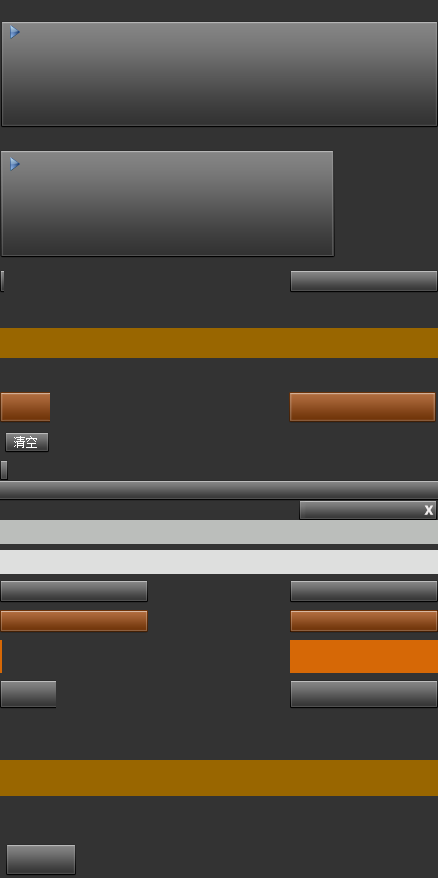
<style>
.page{position:relative;width:438px;height:878px;background:#333333}
.page>*{position:absolute;margin:0}
.t1{font:12px "NSimSun";color:#ffffff}
.t2{font:12px "MicrosoftYaHei-Bold";color:#f0eded}
</style>
<div class="page">
<p class="t1" style="left:14px;top:436px;width:23px;height:12px">清空</p>
<p class="t1" style="left:15px;top:436px;width:23px;height:12px">清空</p>
<p class="t2" style="left:424px;top:505px;width:10px;height:10px">X</p>
</div>
